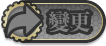
<style>
.page{position:relative;width:106px;height:46px;background:#333333}
.page>*{position:absolute;margin:0}
.t1{font:22px "RyuminPr6N-ExBold";letter-spacing:-0.075em;color:#818181}
</style>
<div class="page">
<p class="t1" style="left:49px;top:11px;width:41px;height:21px">變更</p>
</div>
